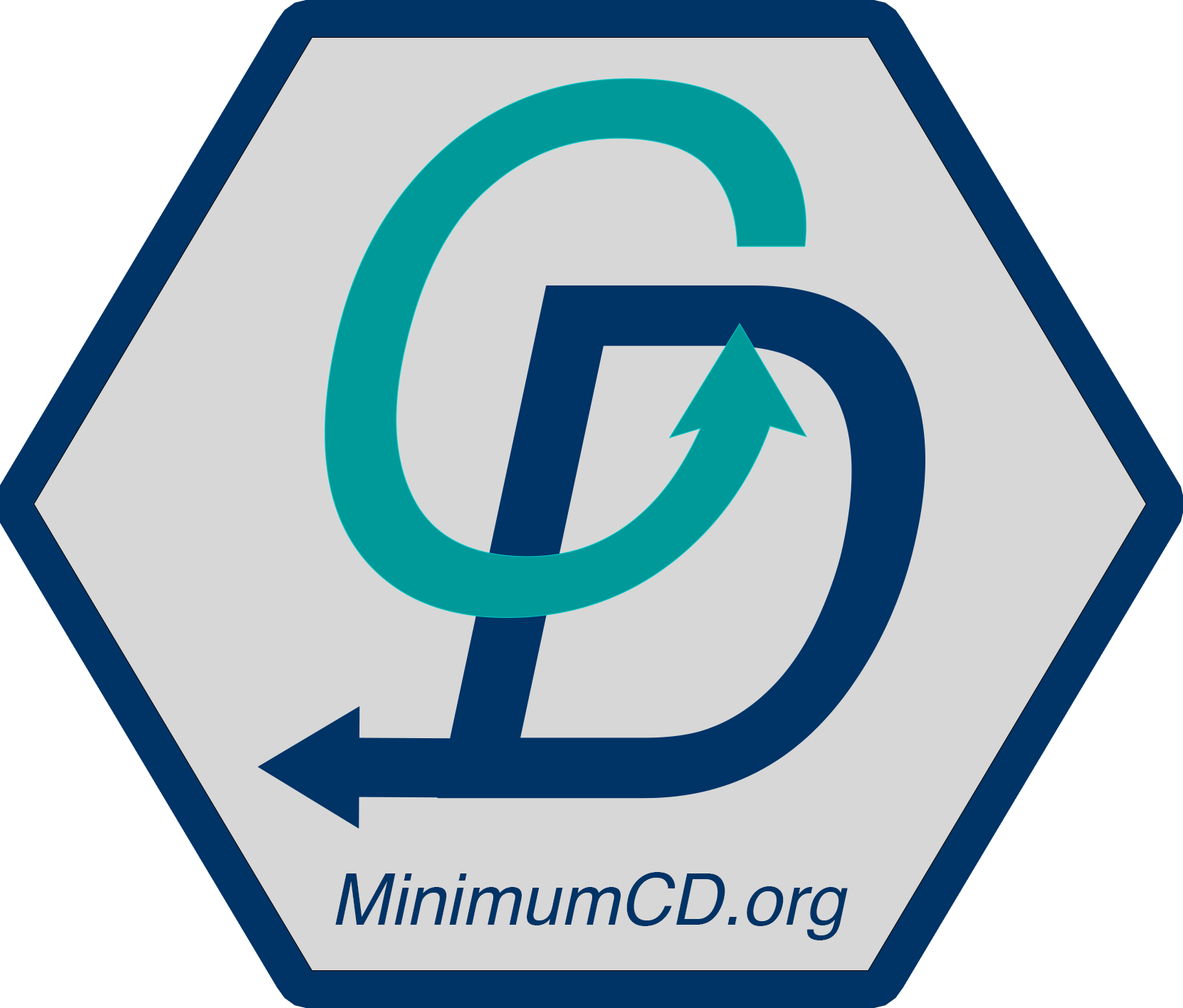
<style>
.page{position:relative;width:1183px;height:1008px;background:#d7d7d7}
.page>*{position:absolute;margin:0}
.t1{font:71.2px "Helvetica-Oblique";color:#003366}
</style>
<div class="page">
<p class="t1" style="left:335px;top:872px;width:513px;height:68px">MinimumCD.org</p>
</div>
